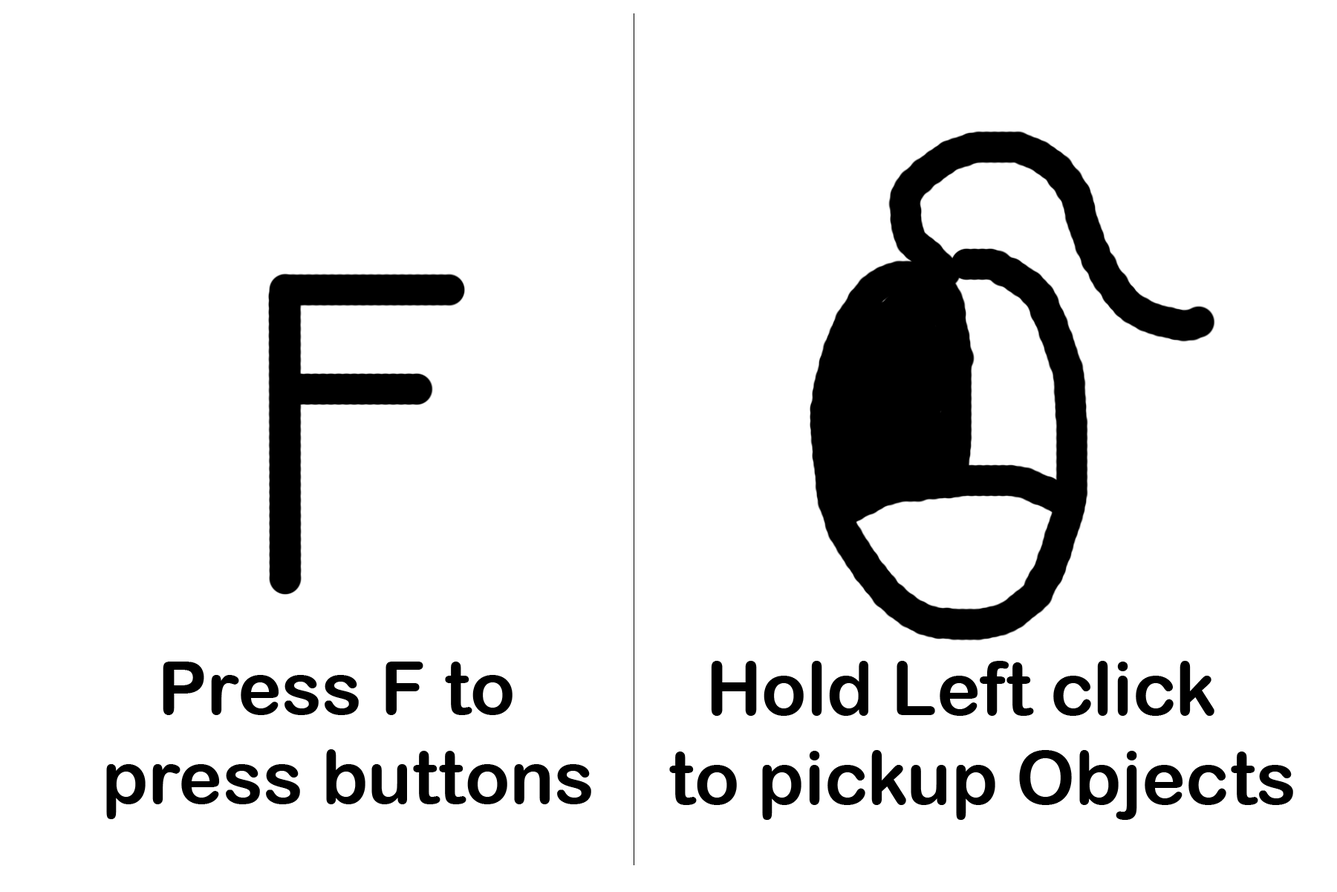
<style>
.page{position:relative;width:1337px;height:892px;background:#ffffff}
.page>*{position:absolute;margin:0}
.t1{font:74.3px "ArialRoundedMTBold";color:#000000}
</style>
<div class="page">
<p class="t1" style="left:106px;top:661px;width:485px;height:158px">Press F to<br>press buttons</p>
<p class="t1" style="left:669px;top:661px;width:625px;height:159px">Hold Left click<br> to pickup Objects</p>
</div>
